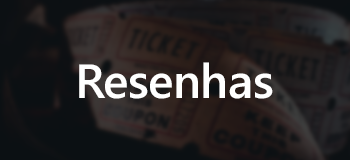
<style>
.page{position:relative;width:350px;height:160px}
.page>*{position:absolute;margin:0}
.t1{font:48px "SegoeUI-Semibold";letter-spacing:-0.01em;color:#ffffff}
</style>
<div class="page">
<p class="t1" style="left:79px;top:62px;width:194px;height:37px">Resenhas</p>
</div>
